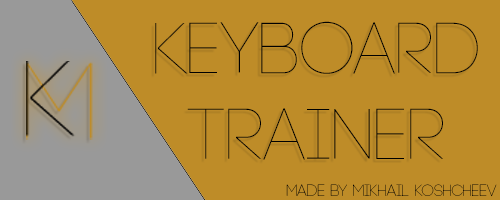
<style>
.page{position:relative;width:500px;height:200px;background:#be8c28}
.page>*{position:absolute;margin:0}
.t1{font:72px "Code-Light";color:#000000}
.t2{font:16px "Code-Light";color:#000000}
</style>
<div class="page">
<p class="t1" style="left:155px;top:21px;width:323px;height:139px;text-align:center">Keyboard<br>trainer</p>
<p class="t2" style="left:286px;top:184px;width:211px;height:13px">made by MiKhail Koshcheev</p>
</div>
